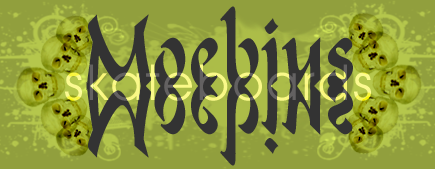
<style>
.page{position:relative;width:435px;height:169px;background:#919f3d}
.page>*{position:absolute;margin:0}
.t1{font:97.9px "FormalScript421BT-Regular";letter-spacing:0.025em;color:#333333;scale:0.67 1}
.t2{font:50px "AvantGardeITCbyBT-Book";letter-spacing:0.075em}
</style>
<div class="page">
<p class="t1" style="left:86px;top:6px;width:267px;height:85px">Moebius</p>
<p class="t2" style="left:65px;top:64px;width:306px;height:37px">skateboards</p>
<p class="t1" style="left:86px;top:81px;width:267px;height:85px">Moebius</p>
</div>
